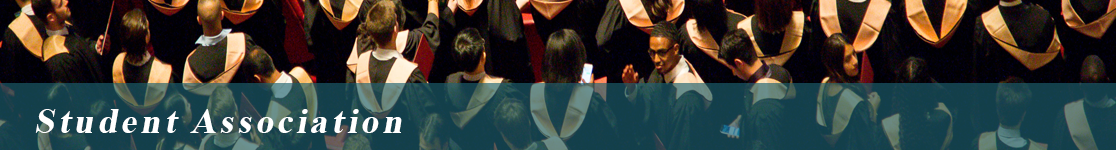
<style>
.page{position:relative;width:1116px;height:150px}
.page>*{position:absolute;margin:0}
.t1{font:36px "TimesNewRomanPS-BoldMT";letter-spacing:0.1em;color:#ffffff;font-style:italic}
</style>
<div class="page">
<p class="t1" style="left:35px;top:109px;width:367px;height:24px">Student Association</p>
</div>
